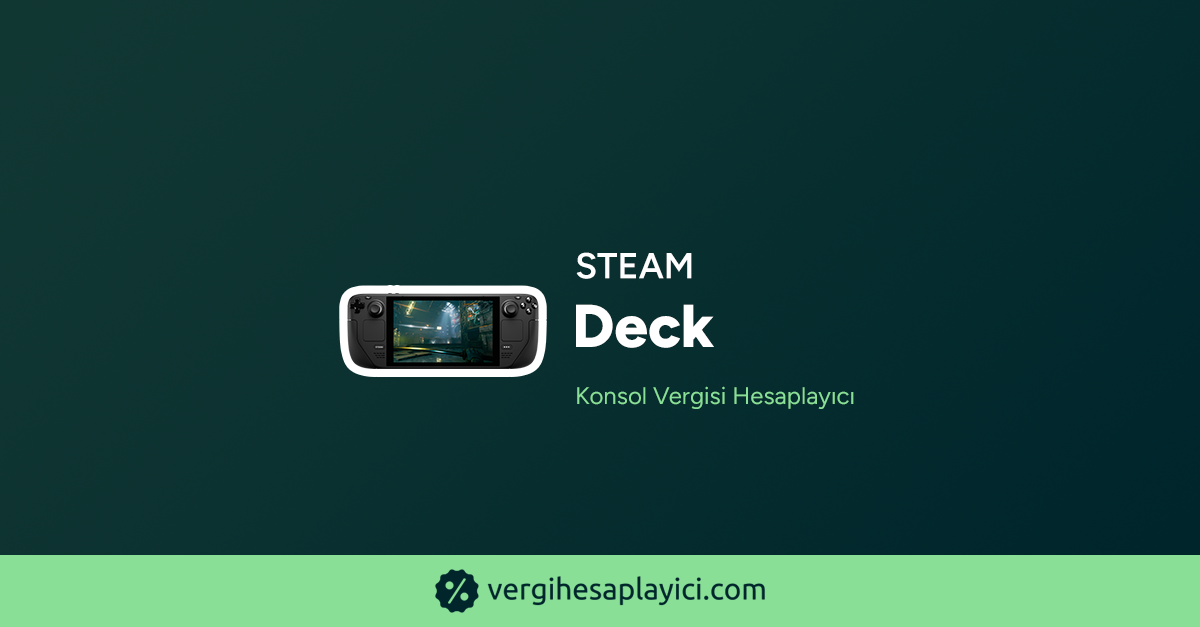
<style>
.page{position:relative;width:1200px;height:627px}
.page>*{position:absolute;margin:0}
.t1{font:36px "Figtree-SemiBold";color:#ffffff;text-transform:uppercase;font-weight:bold}
.t2{font:60.3px "Figtree-ExtraBold";color:#ffffff;font-weight:bold}
.t3{font:24px "Figtree-Regular";color:#88df95;font-weight:bold}
</style>
<div class="page">
<p class="t1" style="left:576px;top:252px;width:116px;height:27px">Steam</p>
<p class="t2" style="left:576px;top:304px;width:138px;height:44px">Deck</p>
<p class="t3" style="left:577px;top:386px;width:277px;height:23px">Konsol Vergisi Hesaplayıcı</p>
</div>
